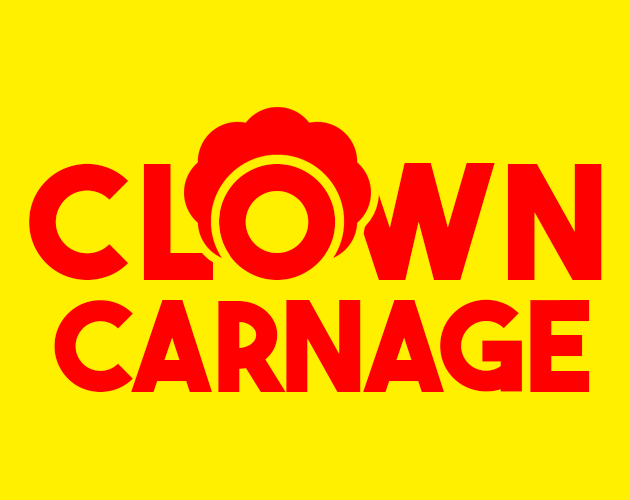
<style>
.page{position:relative;width:630px;height:500px;background:#fff000}
.page>*{position:absolute;margin:0}
.t1{font:158.3px "TheBoldFont-Bold";letter-spacing:0.06em;color:#ff0000}
.t2{font:125px "TheBoldFont-Bold";color:#ff0000}
</style>
<div class="page">
<p class="t1" style="left:29px;top:163px;width:573px;height:117px">CLOWN</p>
<p class="t2" style="left:54px;top:299px;width:536px;height:93px">CARNAGE</p>
</div>
